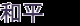
<style>
.page{position:relative;width:80px;height:26px;background:#000000}
.page>*{position:absolute;margin:0}
.t1{font:22px "WebPSD-18463539-0-Regular";color:#3f3254;font-weight:bold}
</style>
<div class="page">
<p class="t1" style="left:0px;top:0px;width:80px;height:26px">和平</p>
</div>
